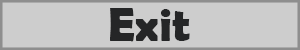
<style>
.page{position:relative;width:300px;height:50px;background:#cdcdcd}
.page>*{position:absolute;margin:0}
.t1{font:48px "BerlinSansFBDemi-Bold";color:#252627}
</style>
<div class="page">
<p class="t1" style="left:110px;top:8px;width:80px;height:34px">Exit</p>
</div>
